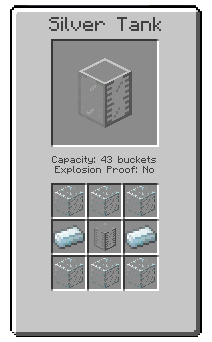
<style>
.page{position:relative;width:212px;height:342px;background:#c6c6c6}
.page>*{position:absolute;margin:0}
.t1{font:16px "Minecraftia";color:#404040}
.t2{font:8px "Minecraftia";color:#404040}
</style>
<div class="page">
<p class="t1" style="left:49px;top:17px;width:112px;height:14px">Silver Tank</p>
<p class="t2" style="left:52px;top:156px;width:104px;height:18px;text-align:center">Capacity: 43 buckets<br>Explosion Proof: No</p>
</div>
